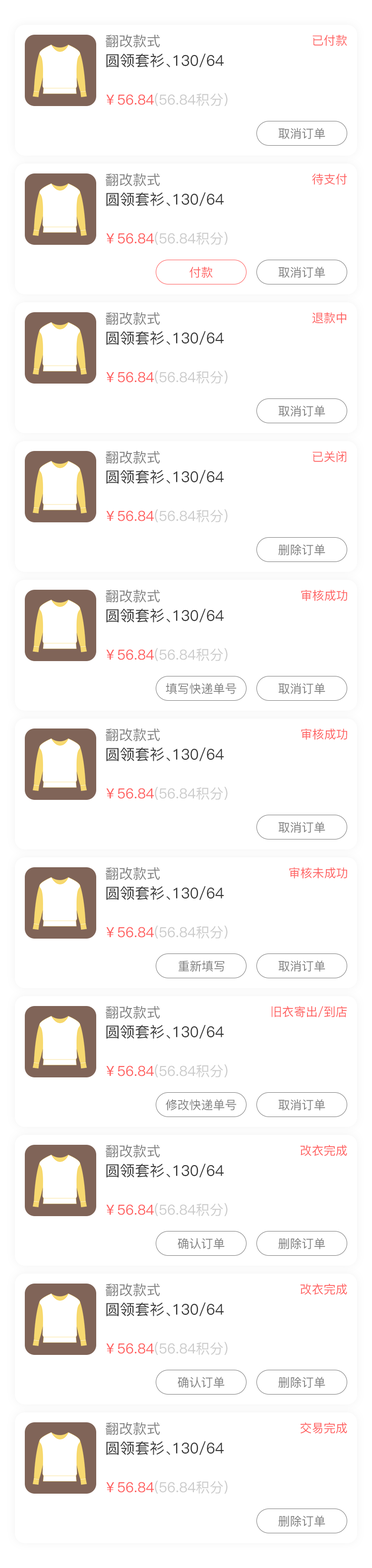
<style>
.page{position:relative;width:372px;height:1568px;background:#ffffff}
.page>*{position:absolute;margin:0}
.t1{font:13.9px "PingFang-SC-Medium";color:#7e7e7e}
.t2{font:11.9px "PingFang-SC-Medium";color:#ff5d5d}
.t3{font:14.9px "PingFang-SC-Medium";color:#363636}
.t4{font:13.9px "PingFang-SC-Medium";color:#cacaca}
.t5{font:13.9px "PingFang-SC-Medium";color:#ff5d5d}
.t6{font:11.9px "PingFang-SC-Medium";color:#7e7e7e}
</style>
<div class="page">
<p class="t1" style="left:106px;top:34px;width:54px;height:14px">翻改款式</p>
<p class="t2" style="left:312px;top:35px;width:35px;height:11px">已付款</p>
<p class="t3" style="left:106px;top:54px;width:118px;height:13px">圆领套衫、130/64</p>
<p class="t4" style="left:106px;top:93px;width:121px;height:13px"><span class="t5">￥56.84</span>(56.84积分)</p>
<p class="t6" style="left:278px;top:128px;width:47px;height:11px">取消订单</p>
<p class="t1" style="left:106px;top:173px;width:54px;height:13px">翻改款式</p>
<p class="t2" style="left:312px;top:173px;width:35px;height:12px">待支付</p>
<p class="t3" style="left:106px;top:192px;width:118px;height:14px">圆领套衫、130/64</p>
<p class="t4" style="left:106px;top:231px;width:121px;height:14px"><span class="t5">￥56.84</span>(56.84积分)</p>
<p class="t2" style="left:189px;top:267px;width:24px;height:11px">付款</p>
<p class="t6" style="left:278px;top:267px;width:47px;height:11px">取消订单</p>
<p class="t1" style="left:106px;top:312px;width:54px;height:13px">翻改款式</p>
<p class="t2" style="left:312px;top:312px;width:34px;height:12px">退款中</p>
<p class="t3" style="left:106px;top:331px;width:118px;height:14px">圆领套衫、130/64</p>
<p class="t4" style="left:106px;top:370px;width:121px;height:14px"><span class="t5">￥56.84</span>(56.84积分)</p>
<p class="t6" style="left:278px;top:405px;width:47px;height:12px">取消订单</p>
<p class="t1" style="left:106px;top:450px;width:54px;height:14px">翻改款式</p>
<p class="t2" style="left:312px;top:451px;width:34px;height:11px">已关闭</p>
<p class="t3" style="left:106px;top:470px;width:118px;height:14px">圆领套衫、130/64</p>
<p class="t4" style="left:106px;top:509px;width:121px;height:13px"><span class="t5">￥56.84</span>(56.84积分)</p>
<p class="t6" style="left:278px;top:544px;width:47px;height:12px">删除订单</p>
<p class="t1" style="left:106px;top:589px;width:54px;height:14px">翻改款式</p>
<p class="t2" style="left:301px;top:590px;width:46px;height:11px">审核成功</p>
<p class="t3" style="left:106px;top:609px;width:118px;height:13px">圆领套衫、130/64</p>
<p class="t4" style="left:106px;top:648px;width:121px;height:13px"><span class="t5">￥56.84</span>(56.84积分)</p>
<p class="t6" style="left:166px;top:683px;width:70px;height:11px">填写快递单号</p>
<p class="t6" style="left:278px;top:683px;width:47px;height:11px">取消订单</p>
<p class="t1" style="left:106px;top:728px;width:54px;height:13px">翻改款式</p>
<p class="t2" style="left:301px;top:728px;width:46px;height:12px">审核成功</p>
<p class="t3" style="left:106px;top:747px;width:118px;height:14px">圆领套衫、130/64</p>
<p class="t4" style="left:106px;top:786px;width:121px;height:14px"><span class="t5">￥56.84</span>(56.84积分)</p>
<p class="t6" style="left:278px;top:822px;width:47px;height:11px">取消订单</p>
<p class="t1" style="left:106px;top:867px;width:54px;height:13px">翻改款式</p>
<p class="t2" style="left:289px;top:867px;width:58px;height:12px">审核未成功</p>
<p class="t3" style="left:106px;top:886px;width:118px;height:14px">圆领套衫、130/64</p>
<p class="t4" style="left:106px;top:925px;width:121px;height:14px"><span class="t5">￥56.84</span>(56.84积分)</p>
<p class="t6" style="left:178px;top:960px;width:46px;height:12px">重新填写</p>
<p class="t6" style="left:278px;top:960px;width:47px;height:12px">取消订单</p>
<p class="t1" style="left:106px;top:1006px;width:54px;height:13px">翻改款式</p>
<p class="t2" style="left:271px;top:1006px;width:76px;height:11px">旧衣寄出/到店</p>
<p class="t3" style="left:106px;top:1025px;width:118px;height:14px">圆领套衫、130/64</p>
<p class="t4" style="left:106px;top:1064px;width:121px;height:13px"><span class="t5">￥56.84</span>(56.84积分)</p>
<p class="t6" style="left:166px;top:1099px;width:70px;height:12px">修改快递单号</p>
<p class="t6" style="left:278px;top:1099px;width:47px;height:12px">取消订单</p>
<p class="t1" style="left:106px;top:1144px;width:54px;height:14px">翻改款式</p>
<p class="t2" style="left:300px;top:1145px;width:47px;height:11px">改衣完成</p>
<p class="t3" style="left:106px;top:1164px;width:118px;height:13px">圆领套衫、130/64</p>
<p class="t4" style="left:106px;top:1203px;width:121px;height:13px"><span class="t5">￥56.84</span>(56.84积分)</p>
<p class="t6" style="left:177px;top:1238px;width:47px;height:11px">确认订单</p>
<p class="t6" style="left:278px;top:1238px;width:47px;height:11px">删除订单</p>
<p class="t1" style="left:106px;top:1283px;width:54px;height:13px">翻改款式</p>
<p class="t2" style="left:300px;top:1284px;width:47px;height:11px">改衣完成</p>
<p class="t3" style="left:106px;top:1302px;width:118px;height:14px">圆领套衫、130/64</p>
<p class="t4" style="left:106px;top:1342px;width:121px;height:13px"><span class="t5">￥56.84</span>(56.84积分)</p>
<p class="t6" style="left:177px;top:1377px;width:47px;height:11px">确认订单</p>
<p class="t6" style="left:278px;top:1377px;width:47px;height:11px">删除订单</p>
<p class="t1" style="left:106px;top:1422px;width:54px;height:13px">翻改款式</p>
<p class="t2" style="left:300px;top:1422px;width:47px;height:12px">交易完成</p>
<p class="t3" style="left:106px;top:1441px;width:118px;height:14px">圆领套衫、130/64</p>
<p class="t4" style="left:106px;top:1480px;width:121px;height:14px"><span class="t5">￥56.84</span>(56.84积分)</p>
<p class="t6" style="left:278px;top:1515px;width:47px;height:12px">删除订单</p>
</div>
